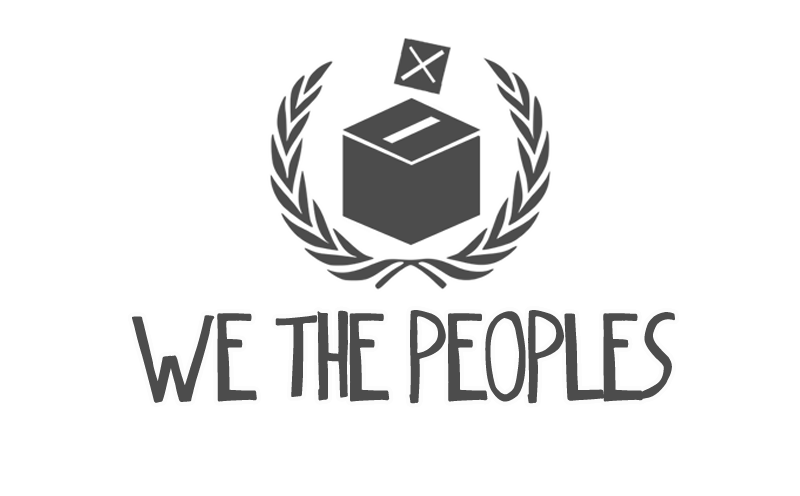
<style>
.page{position:relative;width:800px;height:496px;background:#ffffff}
.page>*{position:absolute;margin:0}
.t1{font:90px "dingleberrysolid";color:#4c4c4c}
</style>
<div class="page">
<p class="t1" style="left:132px;top:310px;width:543px;height:94px">We the peoples</p>
</div>
